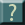
<style>
.page{position:relative;width:25px;height:25px;background:#3f6d70}
.page>*{position:absolute;margin:0}
.t1{font:24px "MyriadPro-Regular";color:#cfd8b5}
</style>
<div class="page">
<p class="t1" style="left:8px;top:4px;width:9px;height:17px">?</p>
</div>
